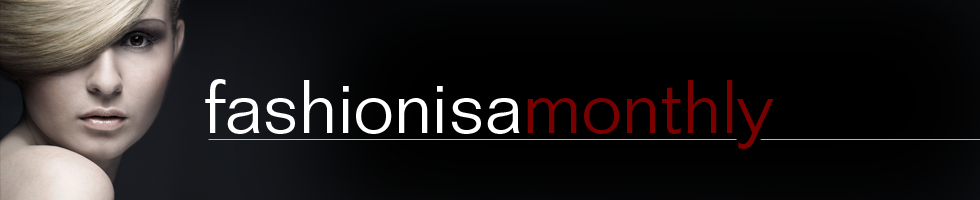
<style>
.page{position:relative;width:980px;height:200px}
.page>*{position:absolute;margin:0}
.t1{font:74px "FolioStd-Light";color:#ffffff}
.t2{font:74px "FolioStd-Light";color:#790000}
</style>
<div class="page">
<p class="t1" style="left:205px;top:79px;width:569px;height:70px">fashionisa<span class="t2">monthly</span></p>
</div>
